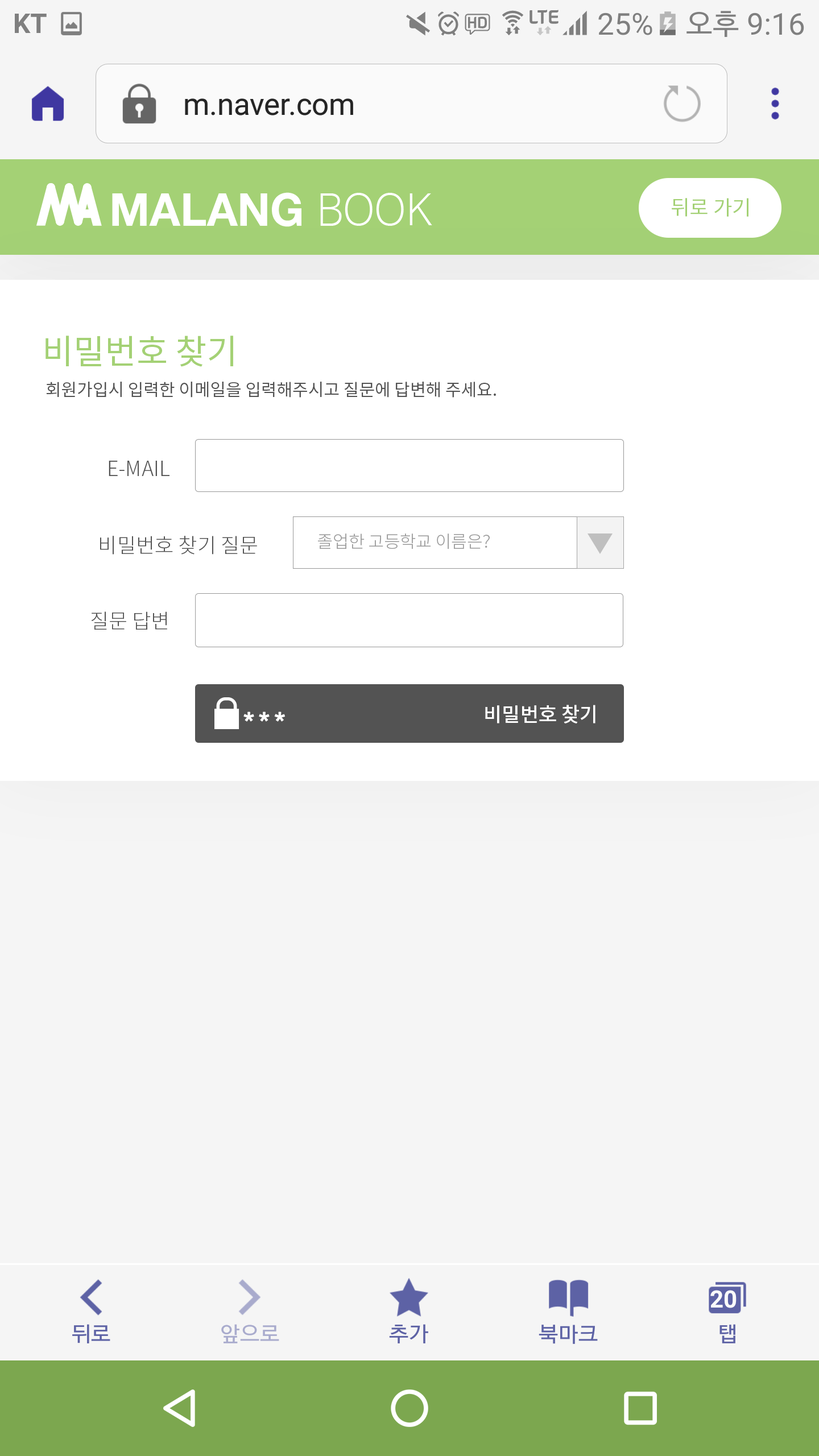
<style>
.page{position:relative;width:819px;height:1456px;background:#f5f5f5}
.page>*{position:absolute;margin:0}
.t1{font:20.5px "NotoSansCJKkr-Regular";color:#a4d175}
.t2{font:34.1px "NotoSansCJKkr-Regular";color:#a4d175}
.t3{font:17.1px "NotoSansCJKkr-Regular";color:#535353}
.t4{font:20.5px "NotoSansCJKkr-Light";color:#535353}
.t5{font:17.1px "NotoSansCJKkr-Light";color:#9c9c9c}
.t6{font:19.9px "NotoSansCJKkr-Medium";color:#ffffff}
</style>
<div class="page">
<p class="t1" style="left:672px;top:198px;width:76px;height:19px">뒤로 가기</p>
<p class="t2" style="left:45px;top:336px;width:188px;height:31px">비밀번호 찾기</p>
<p class="t3" style="left:46px;top:382px;width:450px;height:16px">회원가입시 입력한 이메일을 입력해주시고 질문에 답변해 주세요.</p>
<p class="t4" style="left:109px;top:461px;width:60px;height:15px">E-MAIL</p>
<p class="t5" style="left:318px;top:533px;width:172px;height:16px">졸업한 고등학교 이름은?</p>
<p class="t4" style="left:100px;top:536px;width:157px;height:19px">비밀번호 찾기 질문</p>
<p class="t4" style="left:91px;top:611px;width:76px;height:19px">질문 답변</p>
<p class="t6" style="left:485px;top:705px;width:110px;height:18px">비밀번호 찾기</p>
</div>
